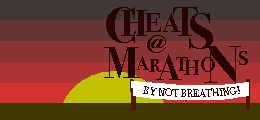
<style>
.page{position:relative;width:260px;height:120px}
.page>*{position:absolute;margin:0}
.t1{font:52px "BodoniSvtyTwoOSITCTT-Bold";color:#270404}
.t2{font:37.1px "BodoniSvtyTwoOSITCTT-Bold";color:#270404}
.t3{font:27.4px "BodoniSvtyTwoOSITCTT-Bold";color:#270404}
.t4{font:42.1px "BodoniSvtyTwoOSITCTT-Bold";color:#270404}
.t5{font:21.8px "BodoniSvtyTwoOSITCTT-Bold";color:#270404}
.t6{font:44.7px "BodoniSvtyTwoOSITCTT-Bold";color:#270404}
.t7{font:37.8px "BodoniSvtyTwoOSITCTT-Bold";color:#270404}
.t8{font:53.4px "BodoniSvtyTwoOSITCTT-Bold";color:#270404}
.t9{font:20px "BodoniSvtyTwoOSITCTT-Bold";color:#270404}
.t10{font:18.6px "BodoniSvtyTwoOSITCTT-Bold";color:#270404}
.t11{font:20.1px "BodoniSvtyTwoOSITCTT-Bold";color:#270404}
.t12{font:21.6px "BodoniSvtyTwoOSITCTT-Bold";color:#270404}
.t13{font:22.1px "BodoniSvtyTwoOSITCTT-Bold";color:#270404}
.t14{font:11px "BodoniSvtyTwoOSITCTT-Book";color:#270404;text-transform:uppercase}
</style>
<div class="page">
<p class="t1" style="left:106px;top:7px;width:30px;height:36px">C</p>
<p class="t2" style="left:121px;top:10px;width:26px;height:26px">H</p>
<p class="t3" style="left:145px;top:13px;width:36px;height:19px">EA</p>
<p class="t4" style="left:173px;top:7px;width:25px;height:29px">T</p>
<p class="t1" style="left:189px;top:13px;width:24px;height:36px">S</p>
<p class="t5" style="left:147px;top:35px;width:19px;height:18px">@</p>
<p class="t6" style="left:104px;top:47px;width:36px;height:31px">M</p>
<p class="t7" style="left:156px;top:54px;width:26px;height:26px">A</p>
<p class="t8" style="left:203px;top:46px;width:38px;height:37px">N</p>
<p class="t9" style="left:239px;top:51px;width:9px;height:14px">S</p>
<p class="t9" style="left:137px;top:56px;width:12px;height:14px">A</p>
<p class="t10" style="left:149px;top:59px;width:12px;height:13px">R</p>
<p class="t11" style="left:176px;top:57px;width:12px;height:14px">T</p>
<p class="t12" style="left:184px;top:60px;width:15px;height:15px">H</p>
<p class="t13" style="left:201px;top:57px;width:14px;height:15px">O</p>
<p class="t14" style="left:143px;top:86px;width:97px;height:11px;rotate:-2deg">by not breathing!</p>
</div>
